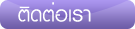
<style>
.page{position:relative;width:135px;height:29px}
.page>*{position:absolute;margin:0}
.t1{font:30px "KittithadaLight45P";color:#ffffff}
</style>
<div class="page">
<p class="t1" style="left:18px;top:2px;width:73px;height:20px">ติดต่อเรา</p>
</div>
